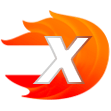
<style>
.page{position:relative;width:111px;height:111px;background:#ffffff}
.page>*{position:absolute;margin:0}
.t1{font:72.6px "ErasITC-Bold";letter-spacing:-0.05em;color:#ffffff}
</style>
<div class="page">
<p class="t1" style="left:32px;top:36px;width:61px;height:48px">X</p>
</div>
